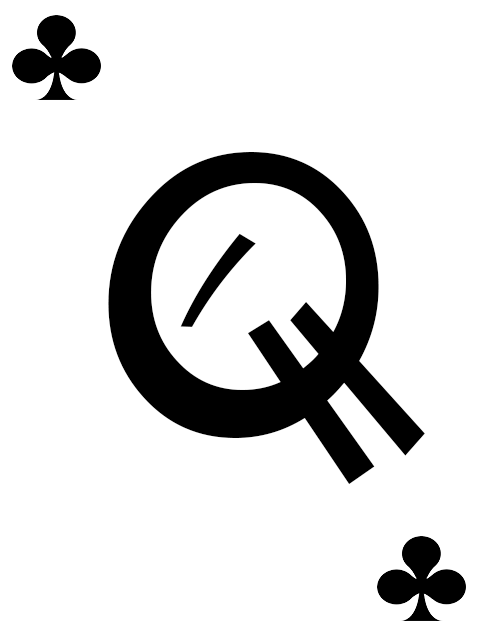
<style>
.page{position:relative;width:480px;height:640px;background:#ffffff}
.page>*{position:absolute;margin:0}
.t1{font:386.3px "Jokerman-Regular";color:#000000}
</style>
<div class="page">
<p class="t1" style="left:108px;top:152px;width:317px;height:332px">Q</p>
</div>
